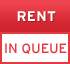
<style>
.page{position:relative;width:70px;height:64px;background:#ffffff}
.page>*{position:absolute;margin:0}
.t1{font:13.6px "InterstateMono";color:#e53a44}
</style>
<div class="page">
<p class="t1" style="left:5px;top:43px;width:62px;height:11px">IN QUEUE</p>
</div>
